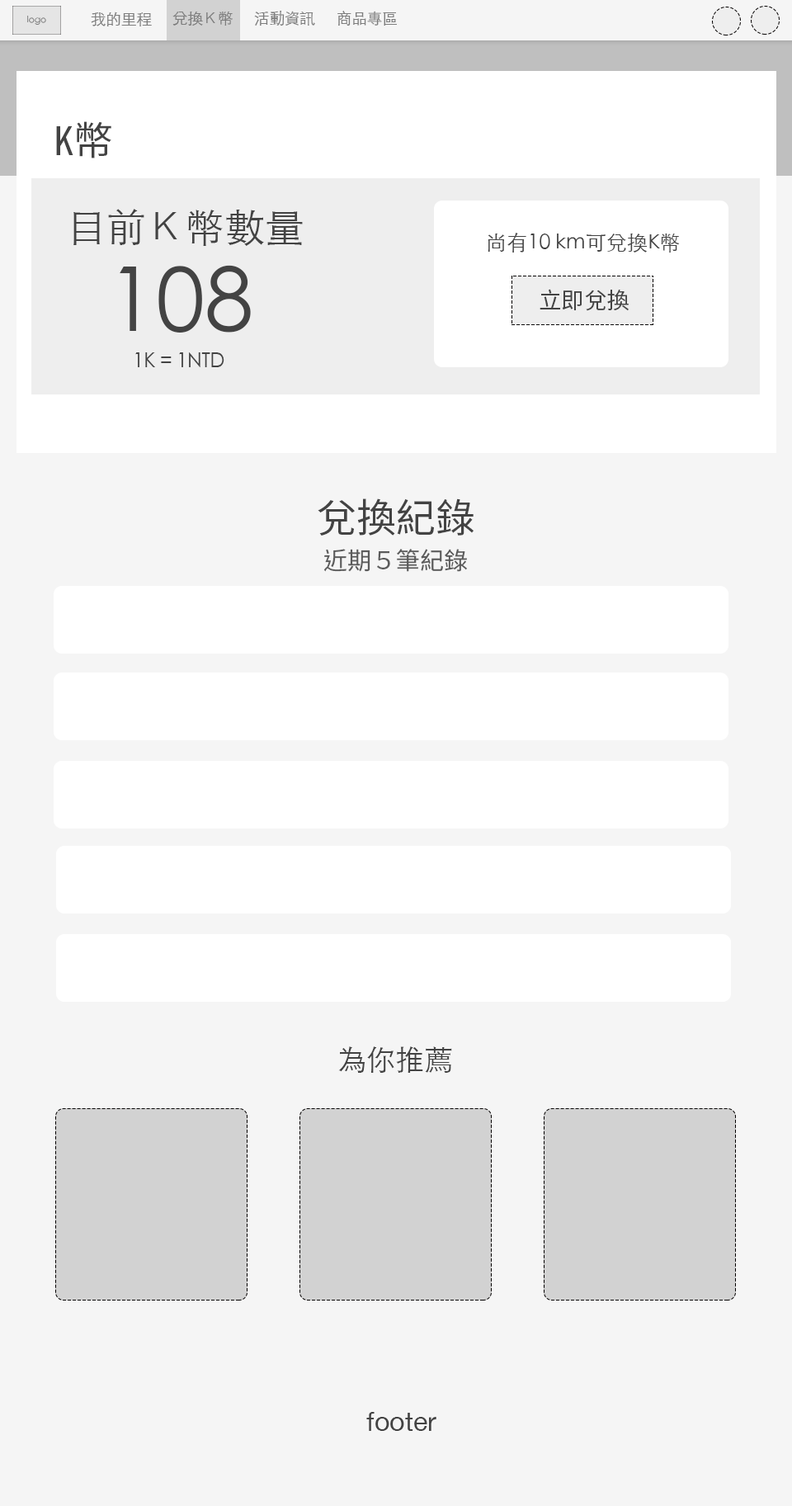
<style>
.page{position:relative;width:792px;height:1506px;background:#f5f5f5}
.page>*{position:absolute;margin:0}
.t1{font:8.8px "STHeitiTC-Light";color:#7d7d7d}
.t2{font:15.3px "STHeitiTC-Light";color:#7d7d7d}
.t3{font:39.6px "NotoSansMonoCJKtc-Regular";color:#434343}
.t4{font:39.6px "STHeitiTC-Light";color:#434343}
.t5{font:20.8px "STHeitiTC-Light";color:#434343}
.t6{font:88.4px "STHeitiTC-Light";color:#434343}
.t7{font:22.7px "NotoSansMonoCJKtc-Regular";color:#434343}
.t8{font:19.4px "STHeitiTC-Light";color:#434343}
.t9{font:24.1px "NotoSansMonoCJKtc-Regular";color:#5b5b5b}
.t10{font:29px "STHeitiTC-Light";color:#434343}
.t11{font:26.7px "HelveticaNeue";color:#434343}
</style>
<div class="page">
<p class="t1" style="left:27px;top:16px;width:19px;height:9px">logo</p>
<p class="t2" style="left:91px;top:12px;width:61px;height:14px">我的里程</p>
<p class="t2" style="left:172px;top:12px;width:61px;height:14px">兌換Ｋ幣</p>
<p class="t2" style="left:254px;top:11px;width:61px;height:15px">活動資訊</p>
<p class="t2" style="left:337px;top:11px;width:60px;height:15px">商品專區</p>
<p class="t3" style="left:56px;top:121px;width:55px;height:37px">K幣</p>
<p class="t4" style="left:73px;top:209px;width:230px;height:37px">目前Ｋ幣數量</p>
<p class="t5" style="left:488px;top:233px;width:192px;height:19px">尚有10 km可兌換K幣</p>
<p class="t6" style="left:120px;top:265px;width:131px;height:67px">108</p>
<p class="t7" style="left:540px;top:289px;width:89px;height:22px">立即兌換</p>
<p class="t8" style="left:135px;top:352px;width:89px;height:15px">1K = 1NTD</p>
<p class="t3" style="left:318px;top:498px;width:156px;height:37px">兌換紀錄</p>
<p class="t9" style="left:323px;top:549px;width:144px;height:23px">近期５筆紀錄</p>
<p class="t10" style="left:338px;top:1046px;width:114px;height:26px">為你推薦</p>
<p class="t11" style="left:366px;top:1412px;width:70px;height:19px">footer</p>
</div>
